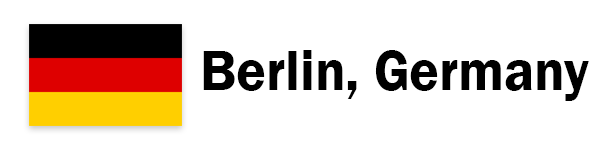
<style>
.page{position:relative;width:600px;height:150px;background:#ffffff}
.page>*{position:absolute;margin:0}
.t1{font:58.9px "FranklinGothic-Demi";color:#000000;scale:0.94 1}
</style>
<div class="page">
<p class="t1" style="left:203px;top:50px;width:386px;height:51px">Berlin, Germany</p>
</div>
